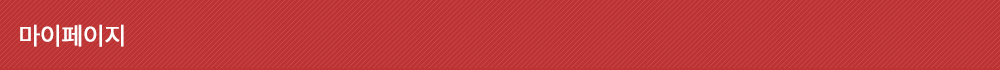
<style>
.page{position:relative;width:1000px;height:70px;background:#bd3232}
.page>*{position:absolute;margin:0}
.t1{font:24px "NotoSansCJKkr-Regular";letter-spacing:-0.05em;color:#ffffff;font-weight:bold}
</style>
<div class="page">
<p class="t1" style="left:20px;top:24px;width:104px;height:23px">마이페이지</p>
</div>
